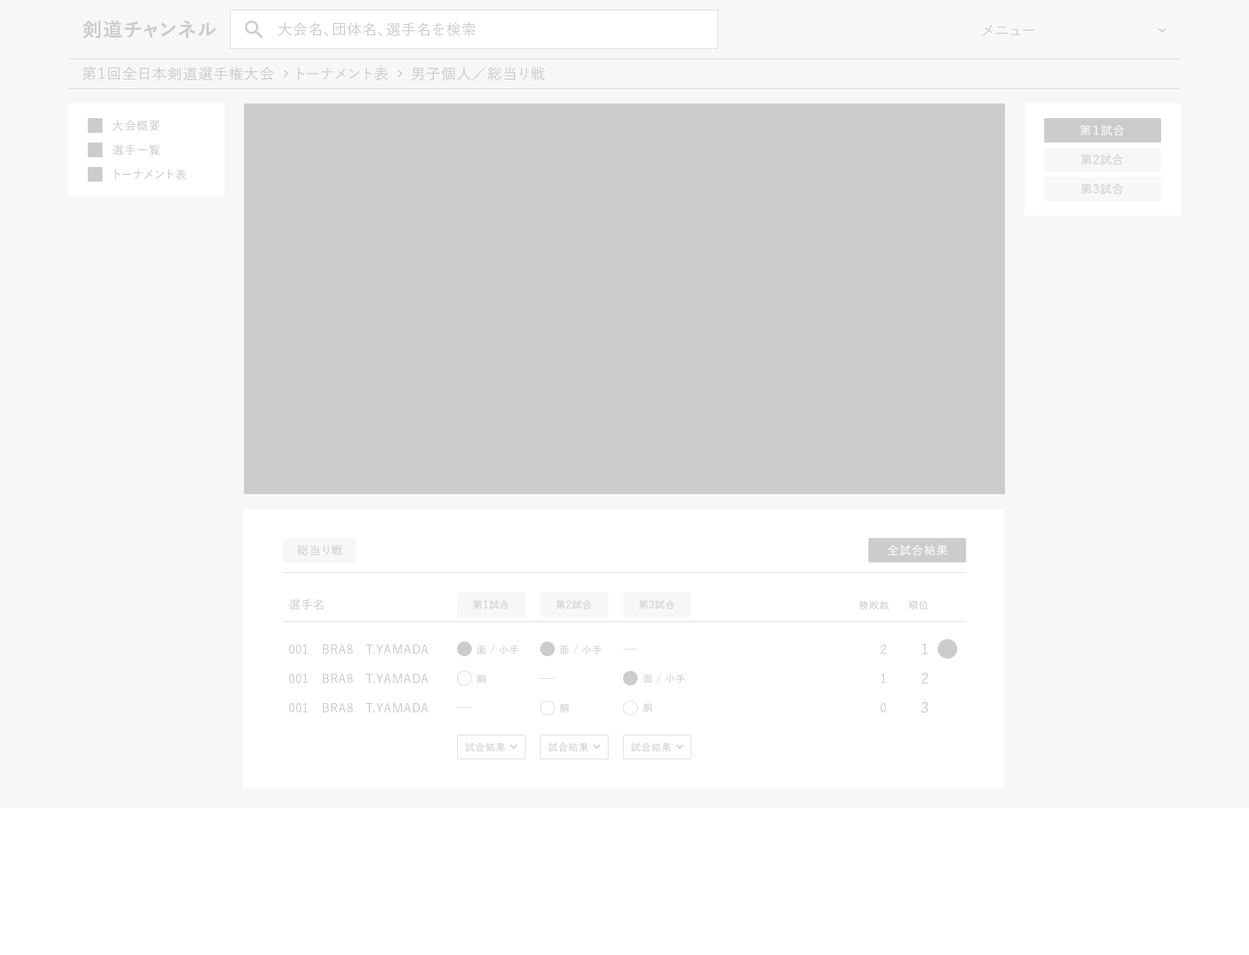
<style>
.page{position:relative;width:1249px;height:955px;background:#f7f7f7}
.page>*{position:absolute;margin:0}
.t1{font:19.5px "YuGo-Bold";letter-spacing:0.05em;color:#cccccc}
.t2{font:14.6px "YuGo-Medium";letter-spacing:0.05em;color:#cccccc}
.t3{font:11.7px/24.4px "YuGo-Medium";letter-spacing:0.05em;color:#cccccc}
.t4{font:11.7px "YuGo-Medium";letter-spacing:0.05em;color:#ffffff}
.t5{font:11.7px/29.3px "YuGo-Medium";letter-spacing:0.05em;color:#cccccc}
.t6{font:11.7px "YuGo-Medium";letter-spacing:0.05em;color:#cccccc}
.t7{font:9.8px "YuGo-Medium";letter-spacing:0.05em;color:#cccccc}
.t8{font:9.8px/29.3px "YuGo-Medium";letter-spacing:0.05em;color:#cccccc}
.t9{font:14.6px/29.3px "YuGo-Medium";letter-spacing:0.05em;color:#cccccc}
</style>
<div class="page">
<p class="t1" style="left:82px;top:20px;width:134px;height:19px">剣道チャンネル</p>
<p class="t2" style="left:278px;top:22px;width:197px;height:14px">大会名、団体名、選手名を検索</p>
<p class="t2" style="left:982px;top:24px;width:53px;height:12px">メニュー</p>
<p class="t2" style="left:82px;top:66px;width:192px;height:15px">第1回全日本剣道選手権大会</p>
<p class="t2" style="left:298px;top:66px;width:90px;height:15px">トーナメント表</p>
<p class="t2" style="left:411px;top:66px;width:134px;height:15px">男子個人／総当り戦</p>
<p class="t3" style="left:112px;top:120px;width:74px;height:60px">大会概要<br>選手一覧<br>トーナメント表</p>
<p class="t4" style="left:1080px;top:124px;width:45px;height:12px">第１試合</p>
<p class="t5" style="left:1081px;top:154px;width:43px;height:40px;text-align:center">第2試合<br>第3試合</p>
<p class="t6" style="left:297px;top:544px;width:46px;height:12px">総当り戦</p>
<p class="t6" style="left:297px;top:544px;width:46px;height:12px">総当り戦</p>
<p class="t4" style="left:888px;top:544px;width:60px;height:11px">全試合結果</p>
<p class="t4" style="left:888px;top:544px;width:60px;height:11px">全試合結果</p>
<p class="t6" style="left:289px;top:599px;width:35px;height:11px">選手名</p>
<p class="t6" style="left:289px;top:599px;width:35px;height:11px">選手名</p>
<p class="t7" style="left:473px;top:600px;width:36px;height:9px">第1試合</p>
<p class="t7" style="left:473px;top:600px;width:36px;height:9px">第1試合</p>
<p class="t7" style="left:556px;top:600px;width:36px;height:9px">第2試合</p>
<p class="t7" style="left:556px;top:600px;width:36px;height:9px">第2試合</p>
<p class="t7" style="left:639px;top:600px;width:36px;height:9px">第3試合</p>
<p class="t7" style="left:639px;top:600px;width:36px;height:9px">第3試合</p>
<p class="t7" style="left:859px;top:600px;width:30px;height:10px">勝敗数</p>
<p class="t7" style="left:859px;top:600px;width:30px;height:10px">勝敗数</p>
<p class="t7" style="left:909px;top:600px;width:20px;height:10px">順位</p>
<p class="t7" style="left:909px;top:600px;width:20px;height:10px">順位</p>
<p class="t5" style="left:289px;top:644px;width:139px;height:68px">001　BRA8　T.YAMADA<br>001　BRA8　T.YAMADA<br>001　BRA8　T.YAMADA</p>
<p class="t5" style="left:289px;top:644px;width:139px;height:68px">001　BRA8　T.YAMADA<br>001　BRA8　T.YAMADA<br>001　BRA8　T.YAMADA</p>
<p class="t8" style="left:477px;top:645px;width:42px;height:38px">面 / 小手<br>胴</p>
<p class="t8" style="left:560px;top:645px;width:42px;height:67px">面 / 小手<br><br>胴</p>
<p class="t5" style="left:881px;top:644px;width:5px;height:68px;text-align:right">2<br>1<br>0</p>
<p class="t9" style="left:921px;top:643px;width:7px;height:69px;text-align:right">1<br>2<br>3</p>
<p class="t8" style="left:643px;top:673px;width:42px;height:39px">面 / 小手<br>胴</p>
<p class="t7" style="left:466px;top:742px;width:39px;height:10px">試合結果</p>
<p class="t7" style="left:466px;top:742px;width:39px;height:10px">試合結果</p>
<p class="t7" style="left:549px;top:742px;width:39px;height:10px">試合結果</p>
<p class="t7" style="left:549px;top:742px;width:39px;height:10px">試合結果</p>
<p class="t7" style="left:631px;top:742px;width:40px;height:10px">試合結果</p>
<p class="t7" style="left:631px;top:742px;width:40px;height:10px">試合結果</p>
</div>
